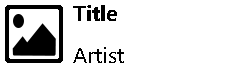
<style>
.page{position:relative;width:247px;height:68px;background:#ffffff}
.page>*{position:absolute;margin:0}
.t1{font:21.9px "SegoeUI-Bold";color:#000000}
.t2{font:22.2px "SegoeUI";color:#000000}
</style>
<div class="page">
<p class="t1" style="left:73px;top:5px;width:44px;height:16px">Title</p>
<p class="t2" style="left:73px;top:47px;width:51px;height:16px">Artist</p>
</div>
